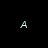
<style>
.page{position:relative;width:48px;height:48px;background:#000000}
.page>*{position:absolute;margin:0}
.t1{font:8.8px "AvantGardeLT-ExtraLightObl";color:#cdf8fd;text-transform:uppercase}
</style>
<div class="page">
<p class="t1" style="left:20px;top:21px;width:7px;height:7px">A</p>
</div>
